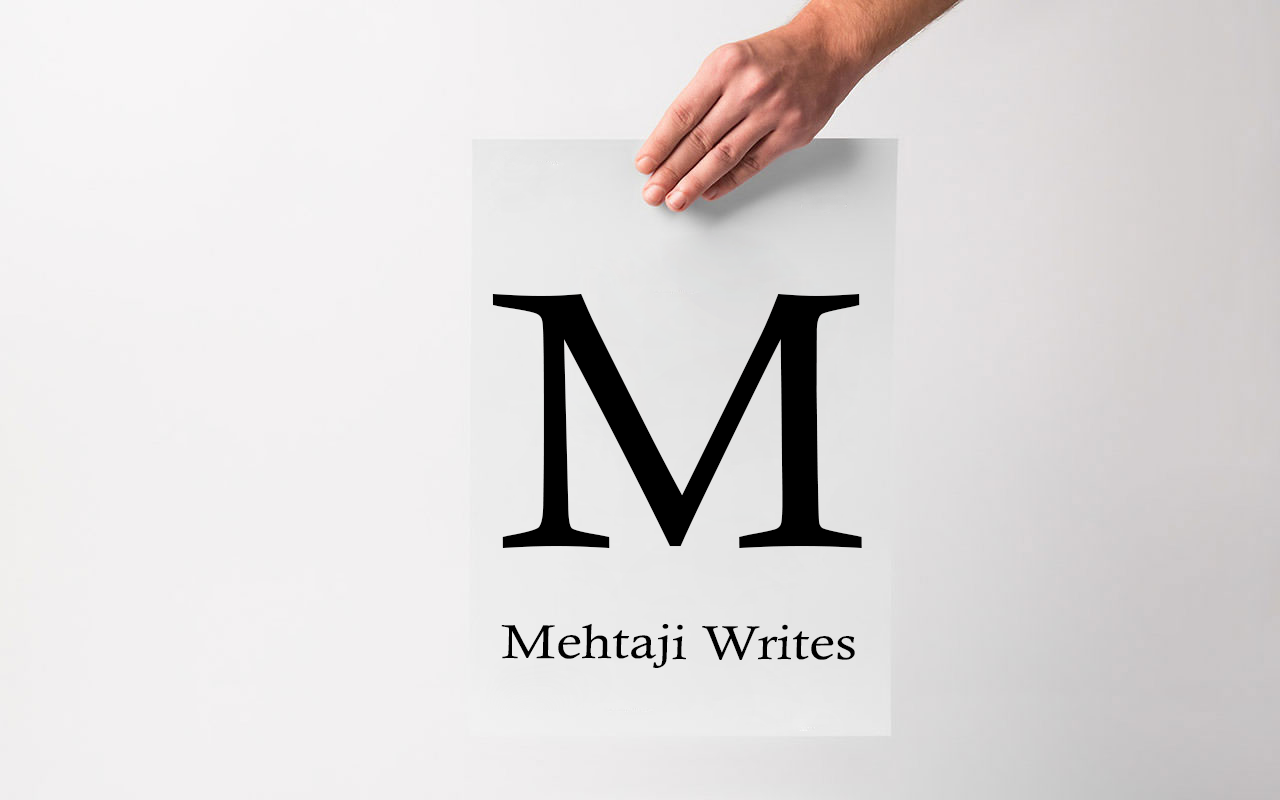
<style>
.page{position:relative;width:1280px;height:800px}
.page>*{position:absolute;margin:0}
.t1{font:366px "CalistoMT";color:#000000;scale:1.06 1}
.t2{font:48px "CalistoMT";color:#000000;scale:1.17 1}
</style>
<div class="page">
<p class="t1" style="left:492px;top:294px;width:370px;height:254px">M</p>
<p class="t2" style="left:501px;top:623px;width:354px;height:45px">Mehtaji Writes</p>
</div>
